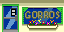
<style>
.page{position:relative;width:64px;height:32px}
.page>*{position:absolute;margin:0}
.t1{font:9.2px "MyriadPro-Bold"}
.t2{font:9.2px "MyriadPro-Bold";color:#999966}
.t3{font:9.2px "MyriadPro-Bold";color:#666633}
</style>
<div class="page">
<p class="t1" style="left:25px;top:12px;width:34px;height:7px">GORROS</p>
<p class="t2" style="left:25px;top:11px;width:34px;height:7px">GORROS</p>
<p class="t3" style="left:26px;top:11px;width:34px;height:7px">GORROS</p>
</div>
